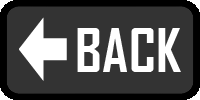
<style>
.page{position:relative;width:200px;height:100px;background:#333333}
.page>*{position:absolute;margin:0}
.t1{font:58.3px "AgencyFB-Bold";color:#ffffff}
</style>
<div class="page">
<p class="t1" style="left:77px;top:28px;width:104px;height:44px">BACK</p>
</div>
